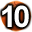
<style>
.page{position:relative;width:32px;height:32px;background:#feffff}
.page>*{position:absolute;margin:0}
.t1{font:30px "Arial-BoldMT";letter-spacing:-0.1em;color:#feffff}
</style>
<div class="page">
<p class="t1" style="left:2px;top:5px;width:27px;height:23px">10</p>
</div>
